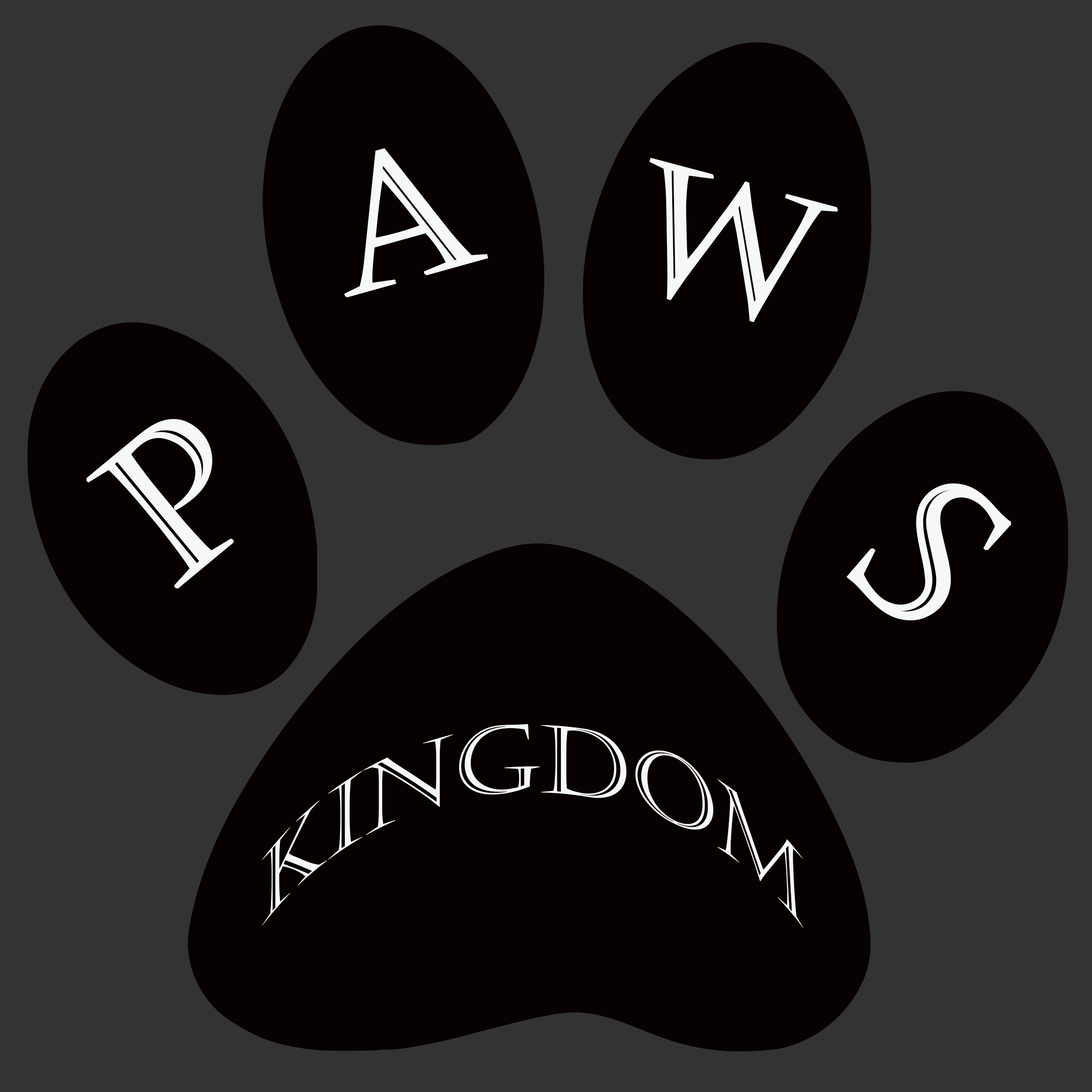
<style>
.page{position:relative;width:1092px;height:1092px;background:#333333}
.page>*{position:absolute;margin:0}
.t1{font:180px "Castellar";color:#f6f7f9;font-weight:bold}
.t2{font:175.5px "Castellar";color:#f6f7f9;font-weight:bold}
.t3{font:195px "Castellar";color:#f6f7f9;font-weight:bold}
.t4{font:206.5px "Castellar";color:#f6f7f9;font-weight:bold}
.t5{font:94.3px "Castellar";color:#f6f7f9}
</style>
<div class="page">
<p class="t1" style="left:344px;top:148px;width:144px;height:149px;rotate:-16deg">A</p>
<p class="t2" style="left:650px;top:158px;width:188px;height:164px;rotate:15deg">W</p>
<p class="t3" style="left:86px;top:419px;width:148px;height:170px;rotate:-40deg">P</p>
<p class="t4" style="left:847px;top:483px;width:164px;height:138px;rotate:43deg">S</p>
<p class="t5" style="left:262px;top:724px;width:541px;height:204px;text-align:center">kingdom</p>
</div>
